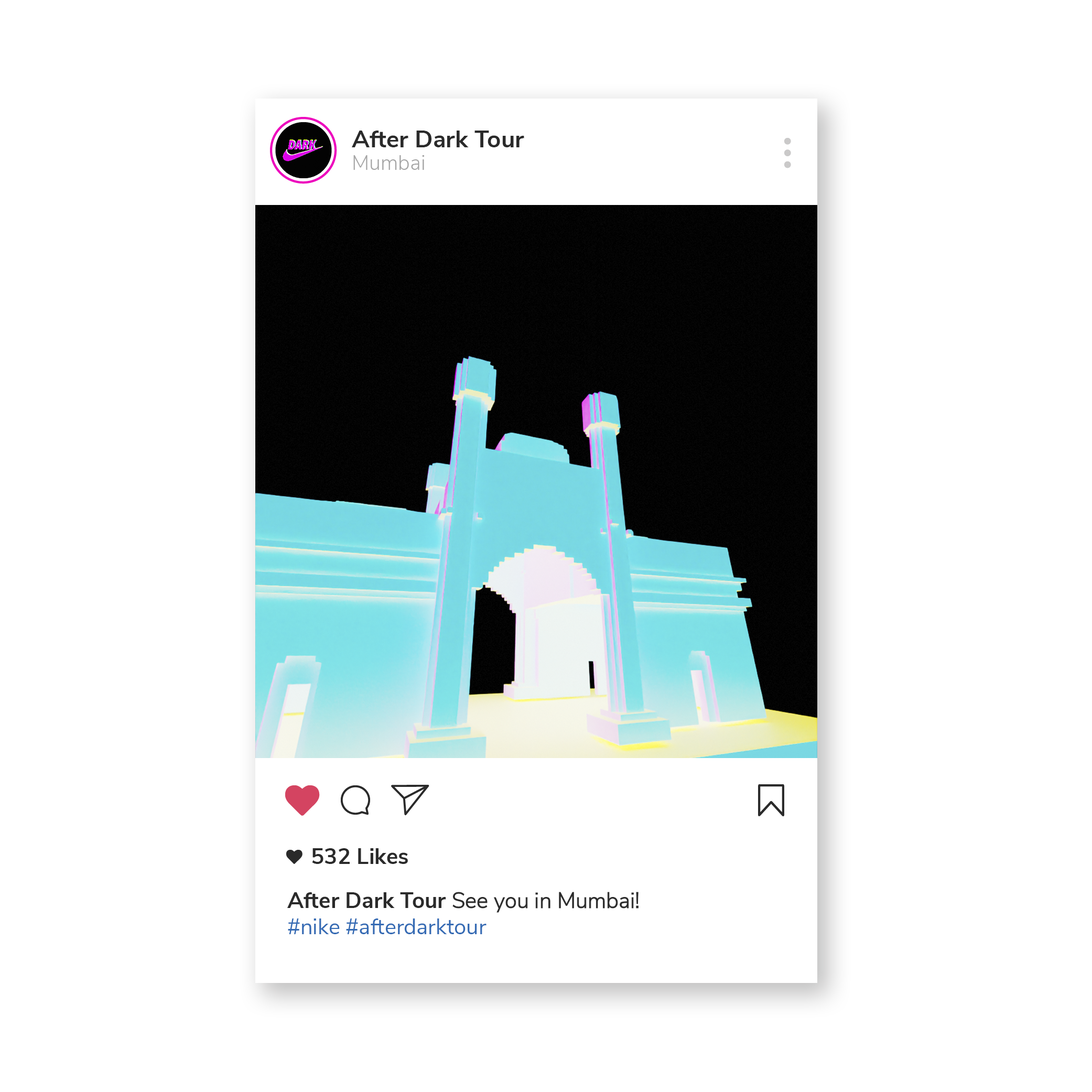
<style>
.page{position:relative;width:1092px;height:1092px;background:#ffffff}
.page>*{position:absolute;margin:0}
.t1{font:24px "NunitoSans-Bold";color:#2a2a2a}
.t2{font:20.7px "NunitoSans-Light";color:#a5a5a5}
.t3{font:22.1px "NunitoSans-Bold";color:#2a2a2a}
.t4{font:21.9px "NunitoSans-Regular";color:#356bb4}
.t5{font:21.9px "NunitoSans-Light";color:#2a2a2a}
</style>
<div class="page">
<p class="t1" style="left:352px;top:131px;width:172px;height:16px">After Dark Tour</p>
<p class="t2" style="left:353px;top:155px;width:71px;height:15px">Mumbai</p>
<p class="t3" style="left:312px;top:848px;width:96px;height:16px">532 Likes</p>
<p class="t4" style="left:287px;top:892px;width:352px;height:42px"><span class="t3">After Dark Tour </span><span class="t5">See you in Mumbai!<br></span>#nike #afterdarktour</p>
</div>
